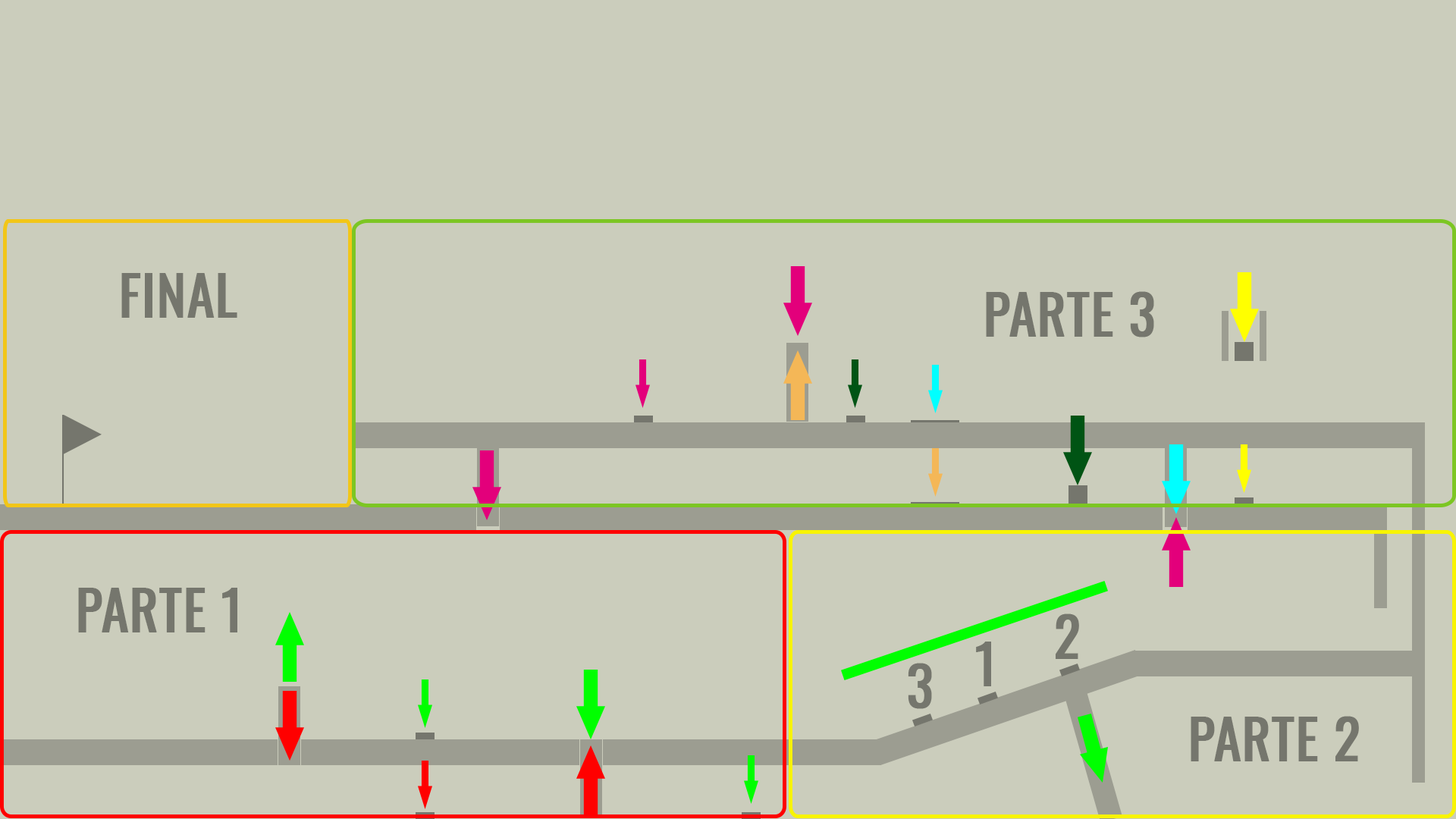
<style>
.page{position:relative;width:1456px;height:819px;background:#cbcdbc}
.page>*{position:absolute;margin:0}
.t1{font:54.6px "Oswald-Regular";color:#75766d;font-weight:bold}
.t2{font:54.7px "Oswald-Regular";color:#75766d;font-weight:bold}
</style>
<div class="page">
<p class="t1" style="left:121px;top:273px;width:116px;height:45px">FINAL</p>
<p class="t1" style="left:986px;top:291px;width:168px;height:46px">PARTE 3</p>
<p class="t1" style="left:78px;top:588px;width:159px;height:44px">PARTE 1</p>
<p class="t2" style="left:1056px;top:613px;width:23px;height:46px">2</p>
<p class="t2" style="left:976px;top:642px;width:15px;height:44px">1</p>
<p class="t2" style="left:908px;top:663px;width:24px;height:46px">3</p>
<p class="t1" style="left:1191px;top:716px;width:168px;height:45px">PARTE 2</p>
</div>
